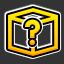
<style>
.page{position:relative;width:64px;height:64px;background:#333333}
.page>*{position:absolute;margin:0}
.t1{font:36px "BaronNeueBold";color:#ffdd00}
</style>
<div class="page">
<p class="t1" style="left:25px;top:19px;width:15px;height:26px">?</p>
</div>
